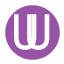
<style>
.page{position:relative;width:64px;height:64px;background:#ffffff}
.page>*{position:absolute;margin:0}
.t1{font:52px "Gidole-Regular";letter-spacing:-0.32em;color:#ffffff;font-weight:bold}
</style>
<div class="page">
<p class="t1" style="left:14px;top:14px;width:36px;height:36px">UU</p>
</div>
